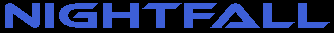
<style>
.page{position:relative;width:334px;height:33px;background:#000000}
.page>*{position:absolute;margin:0}
.t1{font:36.8px "EthnocentricRg-Regular";color:#3d5fd7;scale:1.2 1}
</style>
<div class="page">
<p class="t1" style="left:5px;top:3px;width:325px;height:25px">Nightfall</p>
</div>
